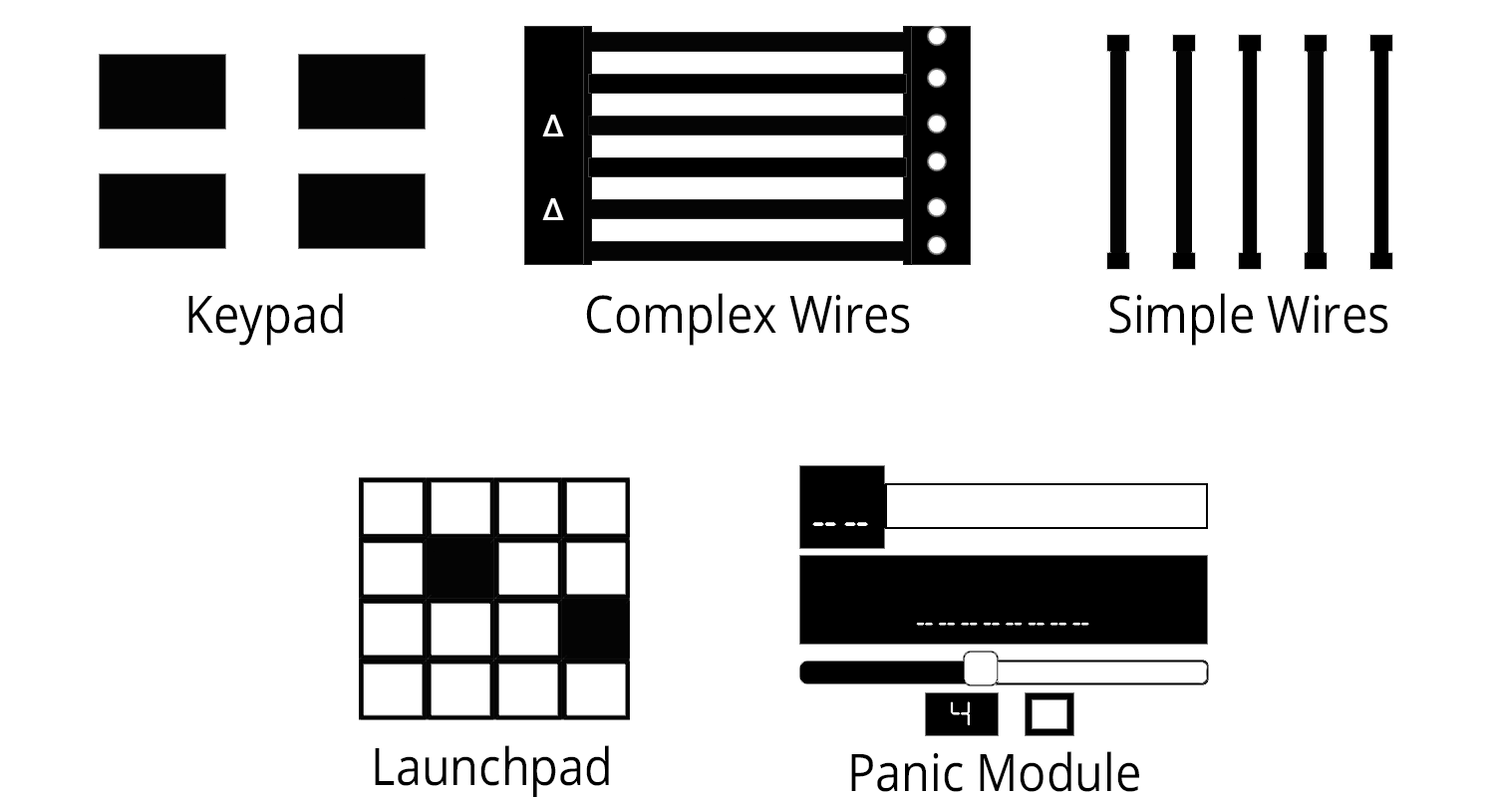
<style>
.page{position:relative;width:1495px;height:797px;background:#ffffff}
.page>*{position:absolute;margin:0}
.t1{font:51.9px "OpenSans";color:#000000;scale:0.9 1}
</style>
<div class="page">
<p class="t1" style="left:188px;top:293px;width:155px;height:53px">Keypad</p>
<p class="t1" style="left:586px;top:293px;width:324px;height:53px">Complex Wires</p>
<p class="t1" style="left:1109px;top:293px;width:280px;height:53px">Simple Wires</p>
<p class="t1" style="left:375px;top:746px;width:234px;height:52px">Launchpad</p>
<p class="t1" style="left:851px;top:752px;width:288px;height:40px">Panic Module</p>
</div>
